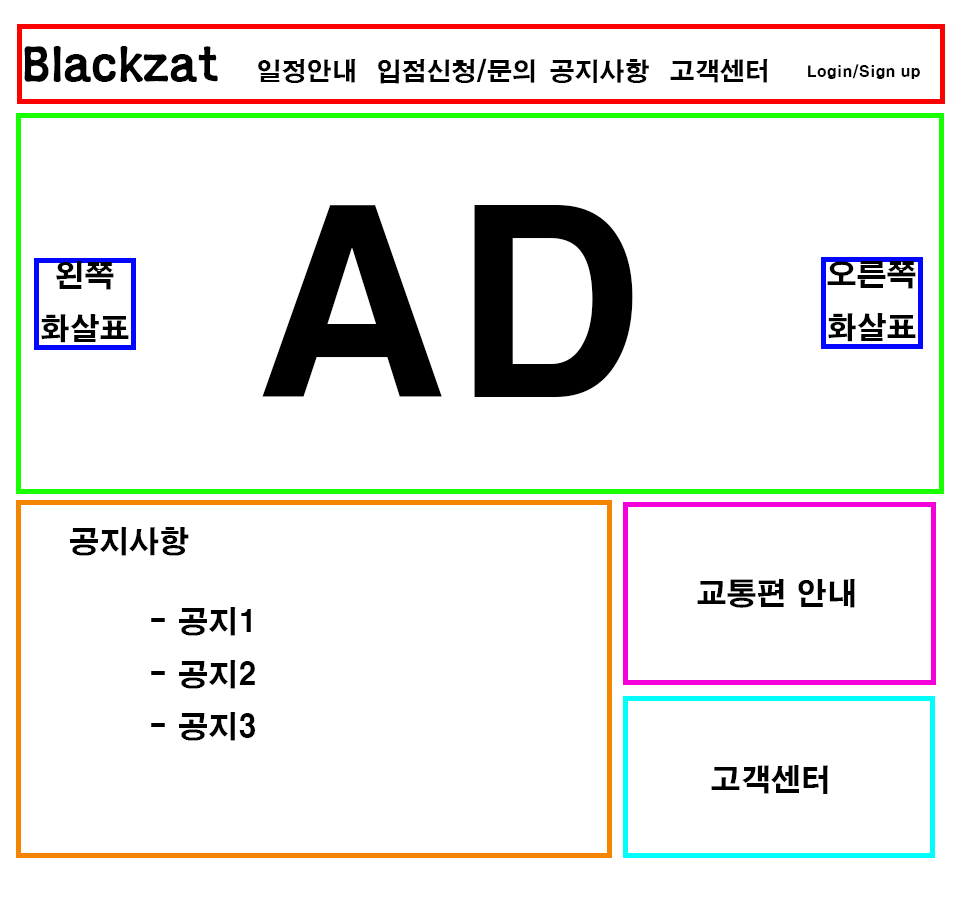
<style>
.page{position:relative;width:964px;height:898px;background:#ffffff}
.page>*{position:absolute;margin:0}
.t1{font:50px "YetR-HM";color:#000000}
.t2{font:25px "H2gtrE";color:#000000}
.t3{font:15px "H2gtrE";color:#000000}
.t4{font:250px "H2gtrE";color:#000000}
.t5{font:30px "H2gtrE";color:#000000}
</style>
<div class="page">
<p class="t1" style="left:24px;top:46px;width:194px;height:36px">Blackzat</p>
<p class="t2" style="left:258px;top:59px;width:98px;height:24px">일정안내</p>
<p class="t2" style="left:378px;top:58px;width:157px;height:26px">입점신청/문의</p>
<p class="t2" style="left:550px;top:59px;width:99px;height:24px">공지사항</p>
<p class="t2" style="left:670px;top:59px;width:98px;height:24px">고객센터</p>
<p class="t3" style="left:808px;top:64px;width:112px;height:15px">Login/Sign up</p>
<p class="t4" style="left:262px;top:205px;width:371px;height:192px">AD</p>
<p class="t5" style="left:41px;top:261px;width:88px;height:82px;text-align:center">왼쪽<br>화살표</p>
<p class="t5" style="left:827px;top:261px;width:89px;height:81px;text-align:center">오른쪽<br>화살표</p>
<p class="t5" style="left:70px;top:527px;width:119px;height:29px">공지사항</p>
<p class="t5" style="left:697px;top:579px;width:158px;height:29px">교통편 안내</p>
<p class="t5" style="left:151px;top:607px;width:104px;height:134px;text-align:center">- 공지1<br>- 공지2<br>- 공지3</p>
<p class="t5" style="left:711px;top:765px;width:117px;height:29px">고객센터</p>
</div>
